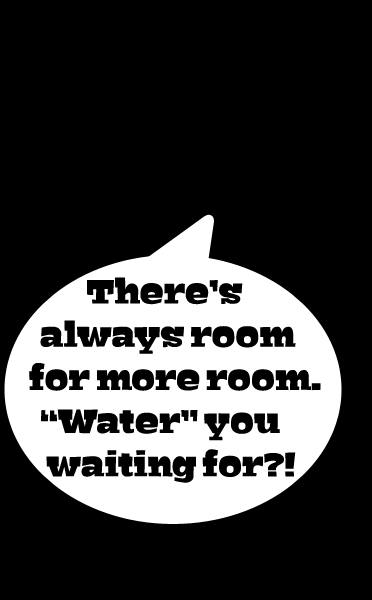
<style>
.page{position:relative;width:372px;height:600px;background:#000000}
.page>*{position:absolute;margin:0}
.t1{font:36px "Bigfish-Black";color:#000000}
</style>
<div class="page">
<p class="t1" style="left:29px;top:277px;width:292px;height:206px">There’s<br>   always room <br> for more room.   <br>   “Water” you <br>    waiting for?!</p>
</div>
